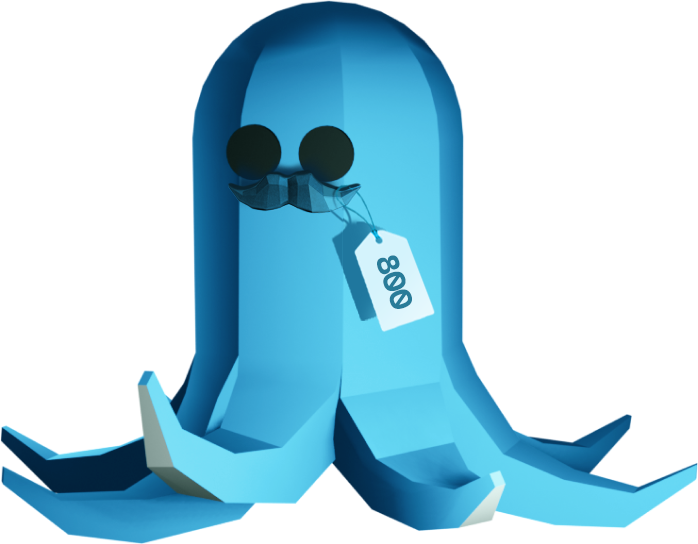
<style>
.page{position:relative;width:698px;height:544px;background:#ffffff}
.page>*{position:absolute;margin:0}
.t1{font:31.4px "GoshaSans-Bold";letter-spacing:-0.09em;color:#287c99}
</style>
<div class="page">
<p class="t1" style="left:377px;top:255px;width:35px;height:54px;rotate:70deg">800</p>
</div>
